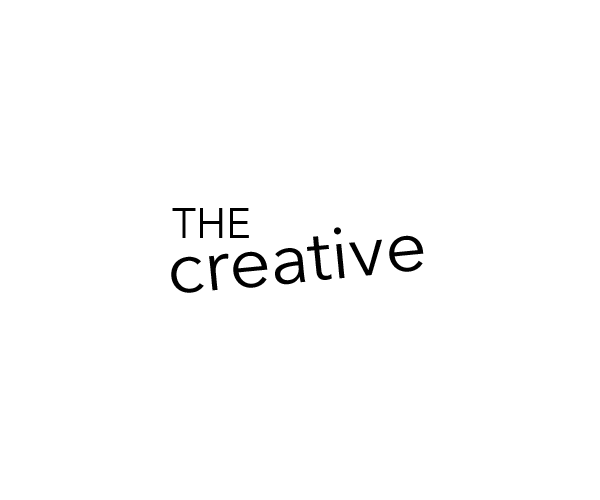
<style>
.page{position:relative;width:600px;height:500px;background:#ffffff}
.page>*{position:absolute;margin:0}
.t1{font:42.1px "AvenirNext-Regular";color:#000000;text-transform:uppercase}
.t2{font:73.1px "AvenirNext-Regular";color:#000000}
</style>
<div class="page">
<p class="t1" style="left:172px;top:208px;width:77px;height:30px">the</p>
<p class="t2" style="left:171px;top:227px;width:253px;height:66px;rotate:-5deg">creative</p>
</div>
